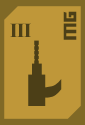
<style>
.page{position:relative;width:85px;height:125px;background:#bf9739}
.page>*{position:absolute;margin:0}
.t1{font:20px "TransformersMovie";letter-spacing:0.04em;color:#4c3f17}
.t2{font:20px "TimesNewRomanPS-BoldMT";letter-spacing:-0.04em;color:#4c3f17}
</style>
<div class="page">
<p class="t1" style="left:63px;top:11px;width:14px;height:29px;rotate:-90deg">mg</p>
<p class="t2" style="left:10px;top:23px;width:21px;height:14px">III</p>
</div>
